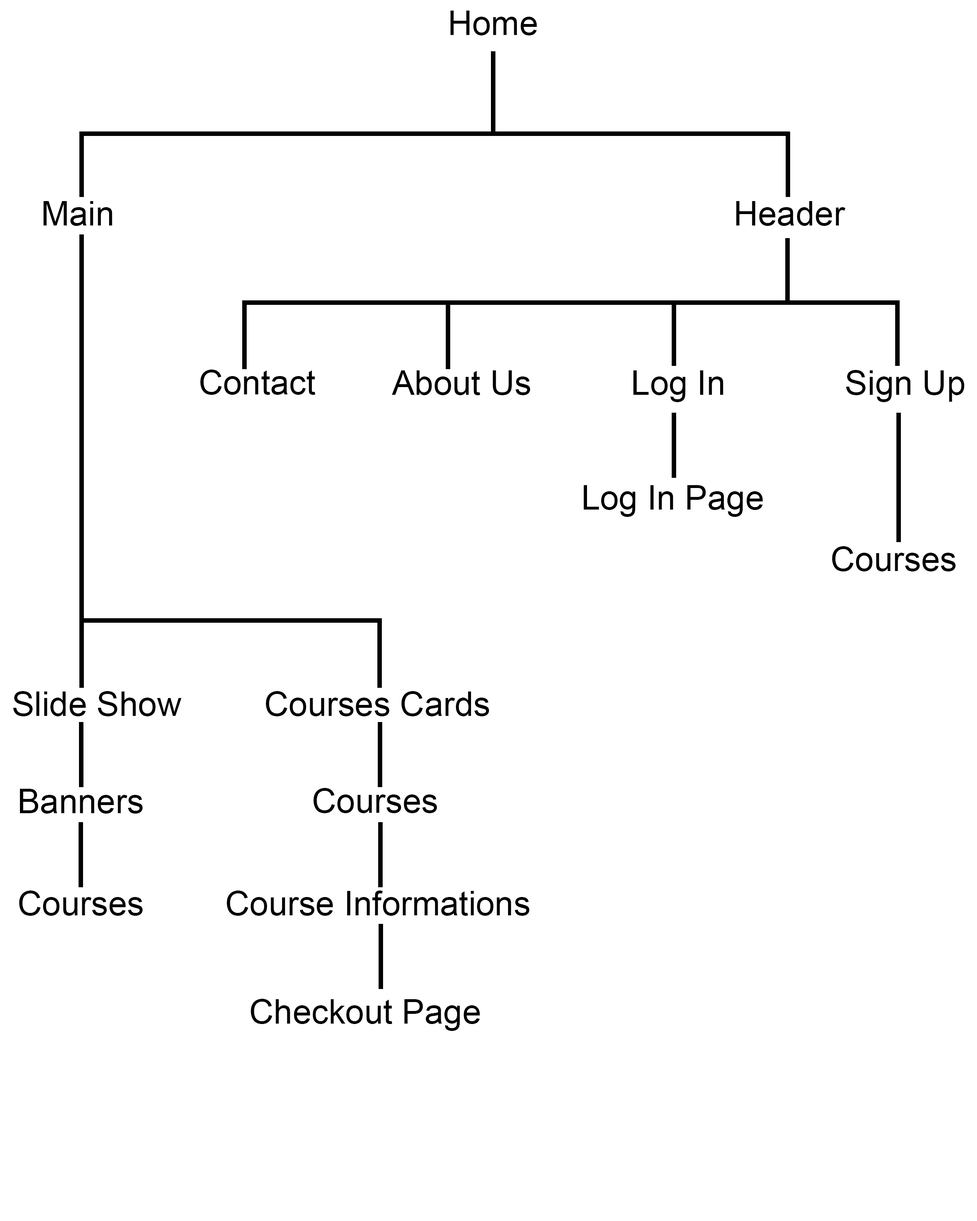
<style>
.page{position:relative;width:977px;height:1221px;background:#ffffff}
.page>*{position:absolute;margin:0}
.t1{font:33.9px "ArialMT";color:#000000}
</style>
<div class="page">
<p class="t1" style="left:450px;top:11px;width:87px;height:24px">Home</p>
<p class="t1" style="left:44px;top:201px;width:68px;height:25px">Main</p>
<p class="t1" style="left:736px;top:201px;width:109px;height:25px">Header</p>
<p class="t1" style="left:200px;top:370px;width:115px;height:25px">Contact</p>
<p class="t1" style="left:391px;top:370px;width:139px;height:25px">About Us</p>
<p class="t1" style="left:633px;top:370px;width:90px;height:32px">Log In</p>
<p class="t1" style="left:846px;top:370px;width:118px;height:32px">Sign Up</p>
<p class="t1" style="left:584px;top:485px;width:179px;height:32px">Log In Page</p>
<p class="t1" style="left:832px;top:546px;width:124px;height:25px">Courses</p>
<p class="t1" style="left:13px;top:691px;width:169px;height:25px">Slide Show</p>
<p class="t1" style="left:266px;top:691px;width:223px;height:25px">Courses Cards</p>
<p class="t1" style="left:20px;top:789px;width:123px;height:25px">Banners</p>
<p class="t1" style="left:313px;top:788px;width:124px;height:25px">Courses</p>
<p class="t1" style="left:19px;top:890px;width:124px;height:26px">Courses</p>
<p class="t1" style="left:227px;top:890px;width:302px;height:26px">Course Informations</p>
<p class="t1" style="left:251px;top:999px;width:229px;height:32px">Checkout Page</p>
</div>
